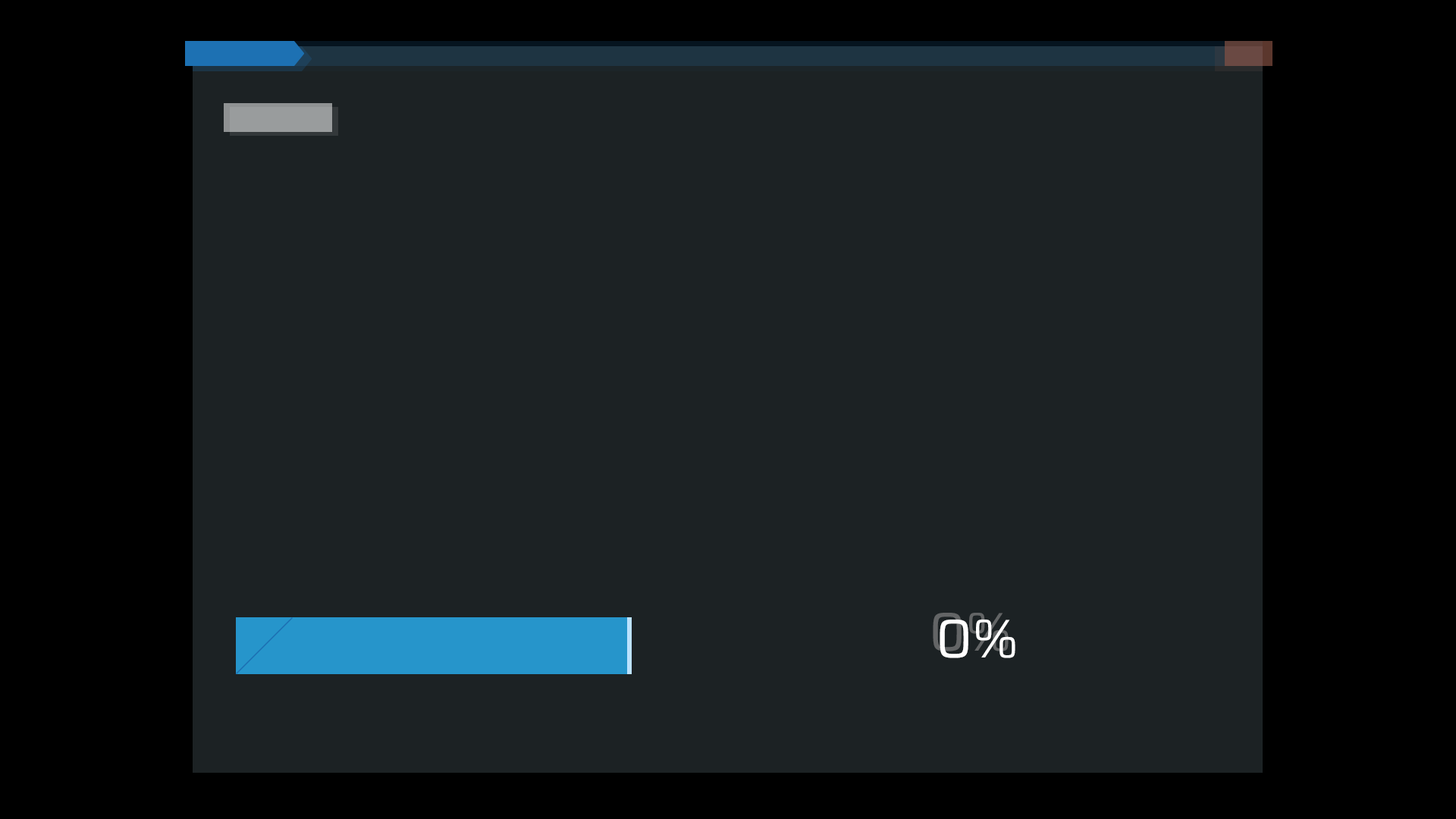
<style>
.page{position:relative;width:1456px;height:819px;background:#1c2224}
.page>*{position:absolute;margin:0}
.t1{font:54.6px "Saira-Regular";color:#ffffff}
</style>
<div class="page">
<p class="t1" style="left:940px;top:620px;width:75px;height:38px">0%</p>
</div>
